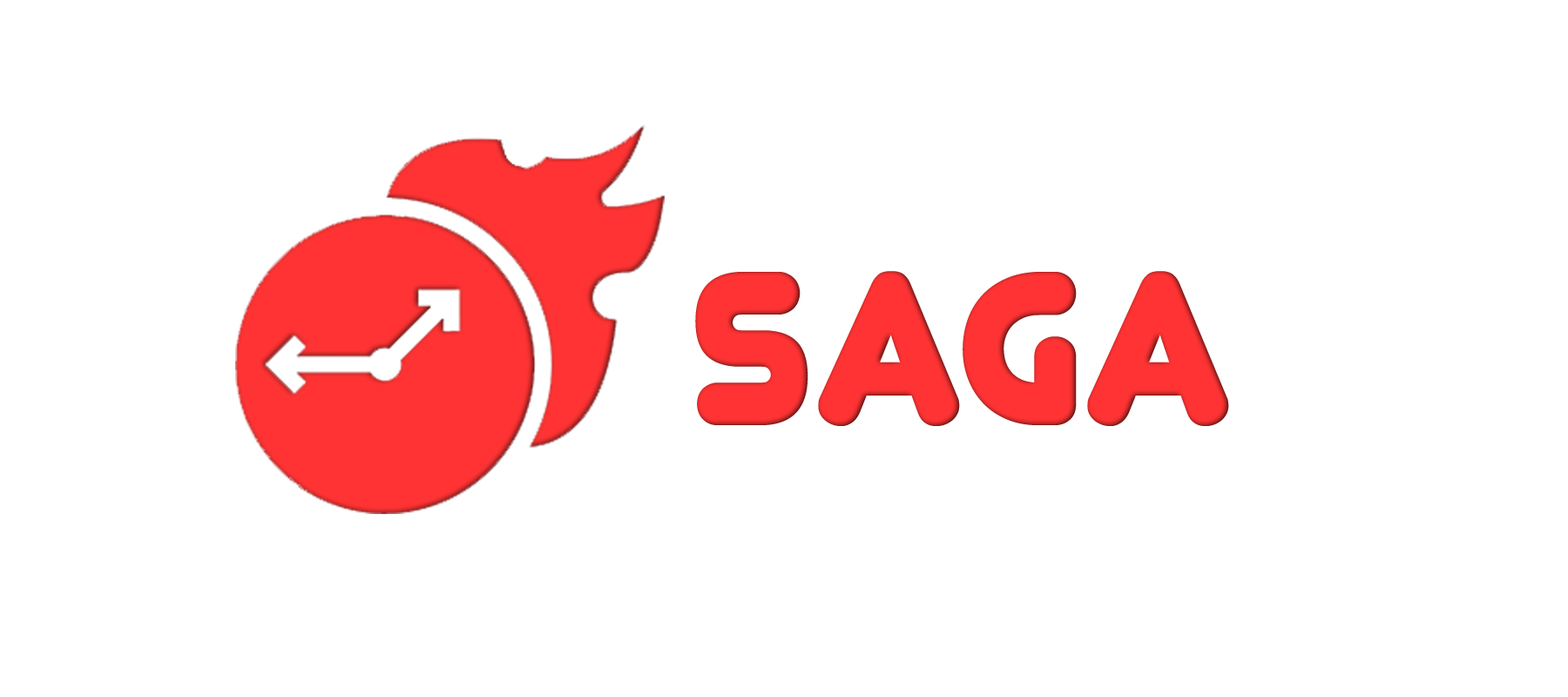
<style>
.page{position:relative;width:1568px;height:697px;background:#ffffff}
.page>*{position:absolute;margin:0}
.t1{font:217.8px "Junegull-Regular";color:#ff3333}
</style>
<div class="page">
<p class="t1" style="left:695px;top:271px;width:534px;height:155px">SAGA</p>
</div>
